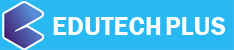
<style>
.page{position:relative;width:234px;height:50px;background:#29b9f2}
.page>*{position:absolute;margin:0}
.t1{font:26.3px "FranklinGothic-Demi";color:#fefeff}
</style>
<div class="page">
<p class="t1" style="left:53px;top:17px;width:108px;height:18px">EDUTECH</p>
<p class="t1" style="left:166px;top:17px;width:60px;height:18px">PLUS</p>
</div>
